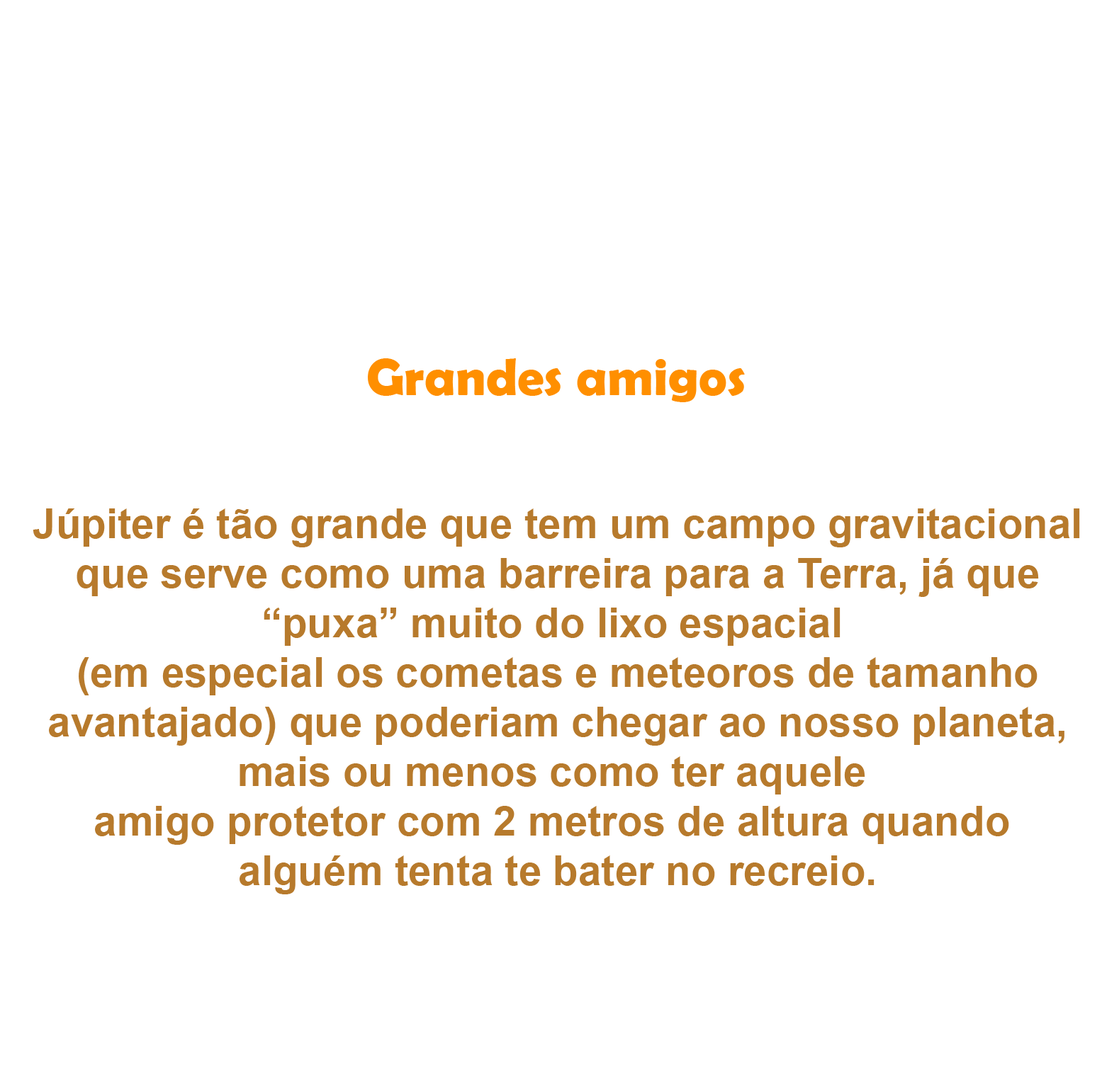
<style>
.page{position:relative;width:1102px;height:1082px;background:#ffffff}
.page>*{position:absolute;margin:0}
.t1{font:53.1px "BerlinSansFBDemi-Bold";color:#ff8f00}
.t2{font:41.3px "Arial-BoldMT";color:#b77a2c}
.t3{font:41.3px "BerlinSansFBDemi-Bold";color:#ff8f00}
</style>
<div class="page">
<p class="t1" style="left:368px;top:358px;width:377px;height:44px">Grandes amigos</p>
<p class="t2" style="left:33px;top:509px;width:1047px;height:386px"><span class="t3"><br><br></span>Júpiter é tão grande que tem um campo gravitacional<br> que serve como uma barreira para a Terra, já que <br>“puxa” muito do lixo espacial <br>(em especial os cometas e meteoros de tamanho<br> avantajado) que poderiam chegar ao nosso planeta, <br>mais ou menos como ter aquele <br>amigo protetor com 2 metros de altura quando <br>alguém tenta te bater no recreio.</p>
</div>
